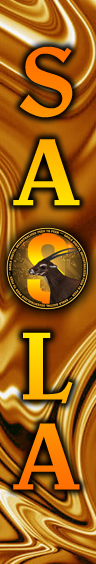
<style>
.page{position:relative;width:96px;height:564px}
.page>*{position:absolute;margin:0}
.t1{font:90px "UTM-Bienvenue"}
</style>
<div class="page">
<p class="t1" style="left:13px;top:46px;width:67px;height:444px;text-align:center">SA       LA</p>
</div>
